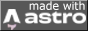
<style>
.page{position:relative;width:88px;height:31px;background:#575757}
.page>*{position:absolute;margin:0}
.t1{font:11px "Verdana";letter-spacing:-0.005em;color:#ffffff}
</style>
<div class="page">
<p class="t1" style="left:29px;top:1px;width:56px;height:9px">made with</p>
</div>
